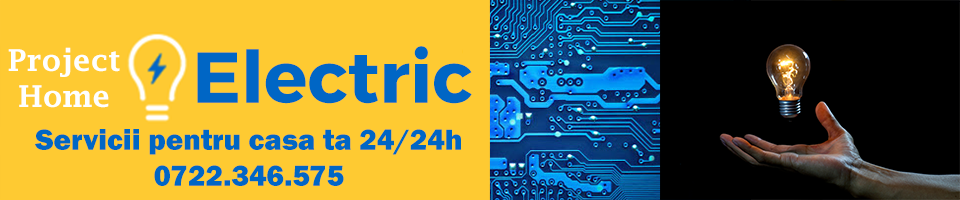
<style>
.page{position:relative;width:960px;height:200px;background:#feca32}
.page>*{position:absolute;margin:0}
.t1{font:30px "LucidaFax-Demi";color:#feffff}
.t2{font:72px "TruenoBd";color:#0066c5}
.t3{font:30px "FranklinGothic-Heavy";color:#0066c5}
</style>
<div class="page">
<p class="t1" style="left:8px;top:47px;width:112px;height:61px;text-align:center">Project<br>Home</p>
<p class="t2" style="left:197px;top:46px;width:275px;height:58px">Electric</p>
<p class="t3" style="left:35px;top:129px;width:426px;height:57px;text-align:center">Servicii pentru casa ta 24/24h<br>0722.346.575</p>
</div>
